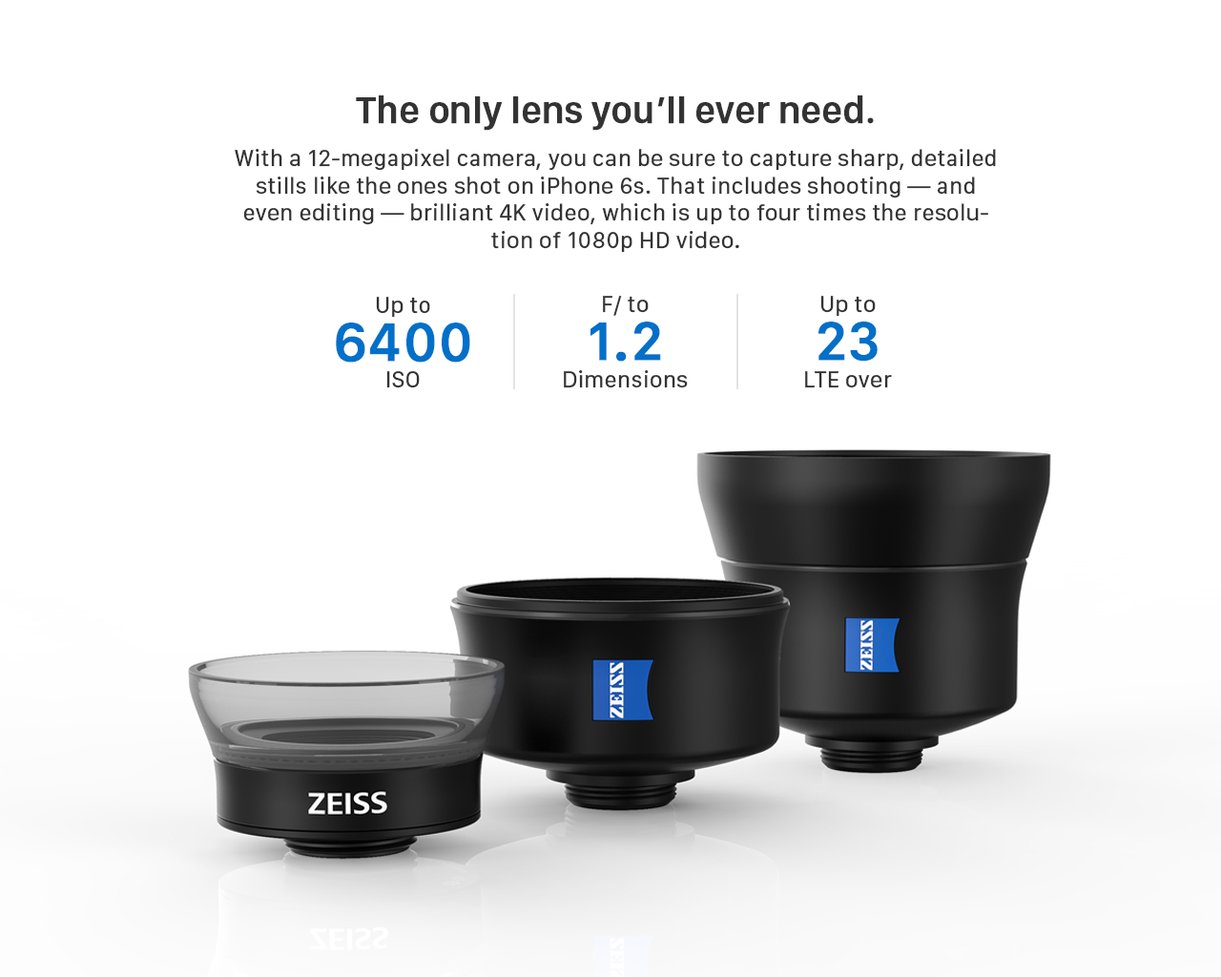
<style>
.page{position:relative;width:1221px;height:977px;background:#ffffff}
.page>*{position:absolute;margin:0}
.t1{font:38px "SanFranciscoDisplay-Semibold";color:#333333;font-weight:bold}
.t2{font:22.9px "SanFranciscoText-Regular";color:#333333;font-weight:bold}
.t3{font:55.8px/47.8px "SanFranciscoText-Semibold";color:#0070c9;font-weight:bold}
</style>
<div class="page">
<p class="t1" style="left:356px;top:95px;width:518px;height:36px">The only lens you’ll ever need.</p>
<p class="t2" style="left:235px;top:149px;width:761px;height:104px;text-align:center">With a 12‑megapixel camera, you can be sure to capture sharp, detailed stills like the ones shot on iPhone 6s. That includes shooting — and even editing — brilliant 4K video, which is up to four times the resolution of 1080p HD video.</p>
<p class="t2" style="left:336px;top:297px;width:134px;height:91px;text-align:center">Up to<br><span class="t3">6400<br></span>ISO</p>
<p class="t2" style="left:564px;top:296px;width:124px;height:92px;text-align:center">F/ to<br><span class="t3">1.2<br></span>Dimensions</p>
<p class="t2" style="left:805px;top:296px;width:87px;height:92px;text-align:center">Up to<br><span class="t3">23<br></span>LTE over</p>
</div>
